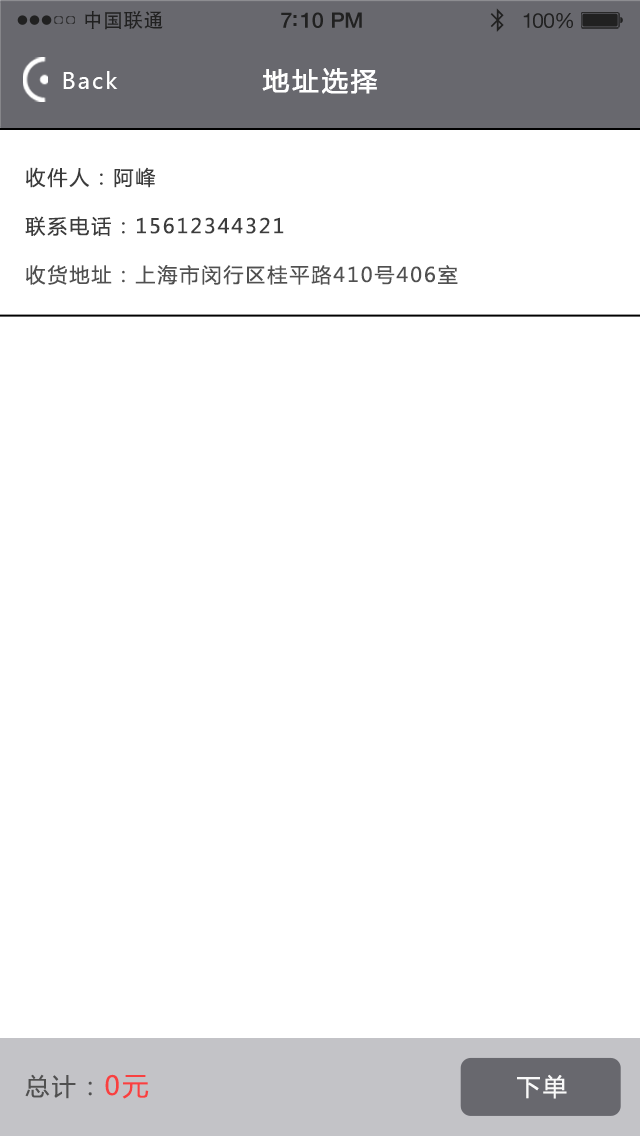
<style>
.page{position:relative;width:640px;height:1136px;background:#ffffff}
.page>*{position:absolute;margin:0}
.t1{font:19.7px "AdobeHeitiStd-Regular";letter-spacing:0.02em;color:#212121}
.t2{font:21.4px "HelveticaNeue-Medium";letter-spacing:-0.02em;color:#212121}
.t3{font:20.6px "HelveticaNeue";letter-spacing:-0.02em;color:#212121}
.t4{font:22px "MicrosoftYaHei";letter-spacing:0.1em;color:#ffffff}
.t5{font:26px "MicrosoftYaHei";letter-spacing:0.1em;color:#ffffff;font-weight:bold}
.t6{font:20px "MicrosoftYaHei";letter-spacing:0.1em;color:#3c3c3c}
.t7{font:20px "MicrosoftYaHei";letter-spacing:0.1em;color:#505050}
.t8{font:24px "MicrosoftYaHei";letter-spacing:0.1em;color:#505050}
.t9{font:26px "MicrosoftYaHei";letter-spacing:0.1em;color:#f84040}
.t10{font:24px "MicrosoftYaHei";letter-spacing:0.1em;color:#f9f9f9}
</style>
<div class="page">
<p class="t1" style="left:85px;top:10px;width:78px;height:20px">中国联通</p>
<p class="t2" style="left:281px;top:12px;width:81px;height:16px">7:10 PM</p>
<p class="t3" style="left:523px;top:13px;width:50px;height:16px">100%</p>
<p class="t4" style="left:63px;top:71px;width:55px;height:18px">Back</p>
<p class="t5" style="left:262px;top:68px;width:115px;height:26px">地址选择</p>
<p class="t6" style="left:26px;top:167px;width:130px;height:21px">收件人：阿峰</p>
<p class="t6" style="left:25px;top:216px;width:259px;height:20px">联系电话：15612344321</p>
<p class="t7" style="left:26px;top:265px;width:432px;height:20px">收货地址：上海市闵行区桂平路410号406室</p>
<p class="t8" style="left:25px;top:1074px;width:124px;height:25px">总计：<span class="t9">0元</span></p>
<p class="t10" style="left:517px;top:1074px;width:50px;height:25px">下单</p>
</div>
